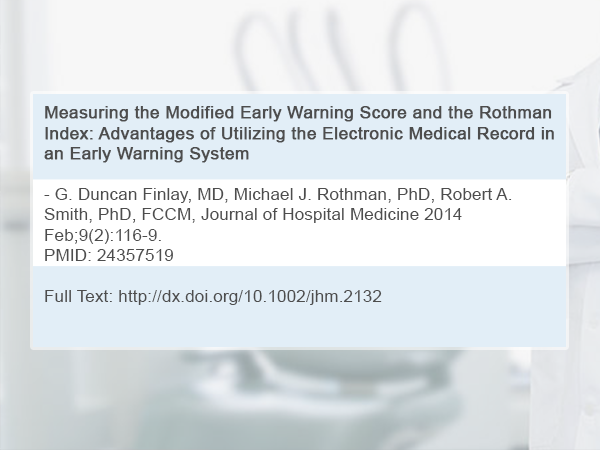
<style>
.page{position:relative;width:600px;height:450px;background:#e2eef7}
.page>*{position:absolute;margin:0}
.t1{font:17px "ArialMT";letter-spacing:0.01em;color:#4d4d4d}
.t2{font:17px "ArialMT";letter-spacing:0.01em;color:#4d4d4d;font-weight:bold}
</style>
<div class="page">
<p class="t1" style="left:44px;top:106px;width:510px;height:199px"><span class="t2">Measuring the Modified Early Warning Score and the Rothman Index: Advantages of Utilizing the Electronic Medical Record in an Early Warning System <br></span><br>- G. Duncan Finlay, MD, Michael J. Rothman, PhD, Robert A. Smith, PhD, FCCM, Journal of Hospital Medicine 2014 Feb;9(2):116-9.<br>PMID: 24357519 <br><br>Full Text: http://dx.doi.org/10.1002/jhm.2132</p>
</div>
